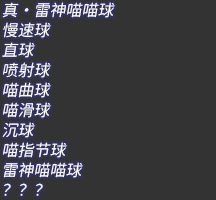
<style>
.page{position:relative;width:216px;height:200px;background:#333333}
.page>*{position:absolute;margin:0}
.t1{font:16px/20px "Resource-Han-Rounded-CN-Regular";color:#ffffff;font-style:italic}
</style>
<div class="page">
<p class="t1" style="left:2px;top:2px;width:113px;height:194px">真·雷神喵喵球<br>慢速球<br>直球<br>喷射球<br>喵曲球<br>喵滑球<br>沉球<br>喵指节球<br>雷神喵喵球<br>？？？</p>
</div>
